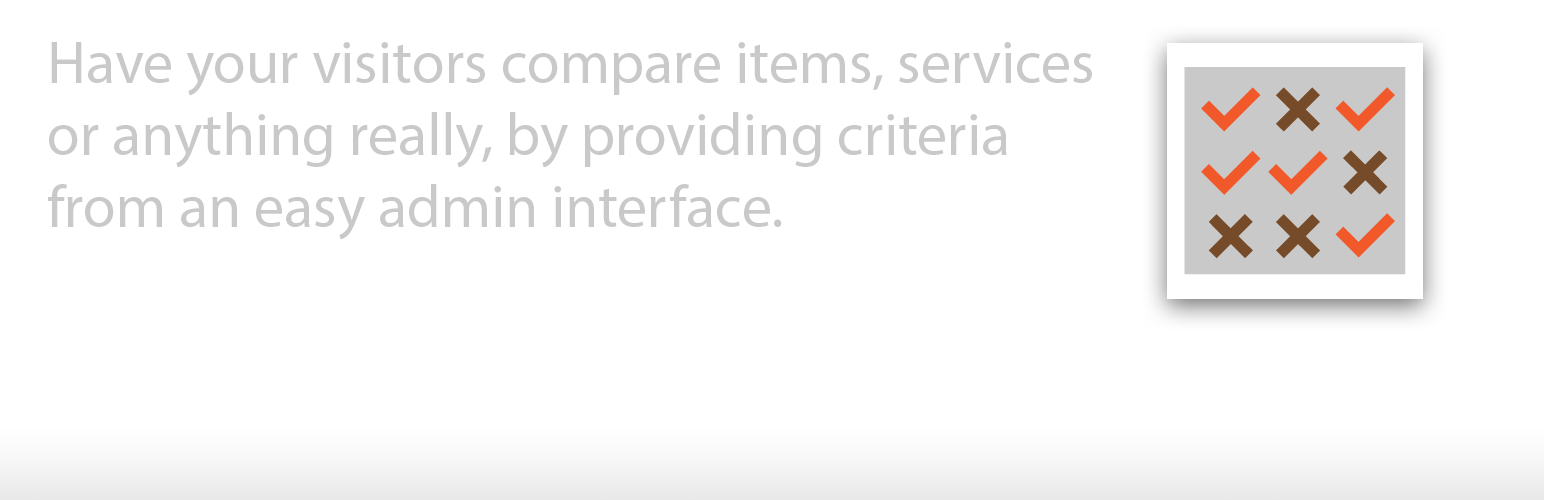
<style>
.page{position:relative;width:1544px;height:500px;background:#ffffff}
.page>*{position:absolute;margin:0}
.t1{font:60px "MyriadPro-Regular";color:#c9c9c9}
</style>
<div class="page">
<p class="t1" style="left:48px;top:42px;width:1044px;height:198px">Have your visitors compare items, services or anything really, by providing criteria from an easy admin interface.</p>
</div>
